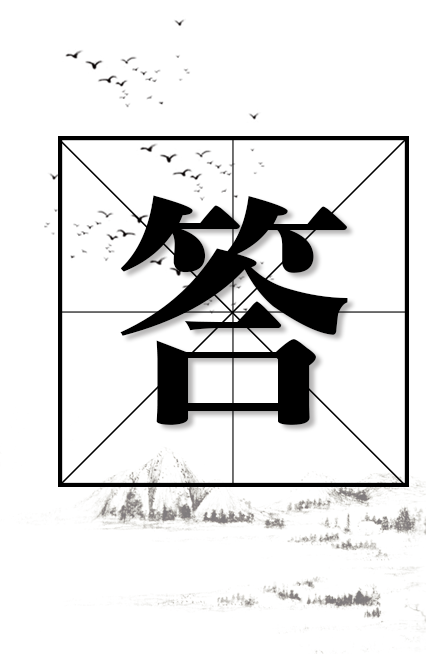
<style>
.page{position:relative;width:445px;height:654px;background:#ffffff}
.page>*{position:absolute;margin:0}
.t1{font:249px "DFLiSong-W7-WINP-BF";color:#000000}
</style>
<div class="page">
<p class="t1" style="left:120px;top:195px;width:228px;height:230px">答</p>
</div>
